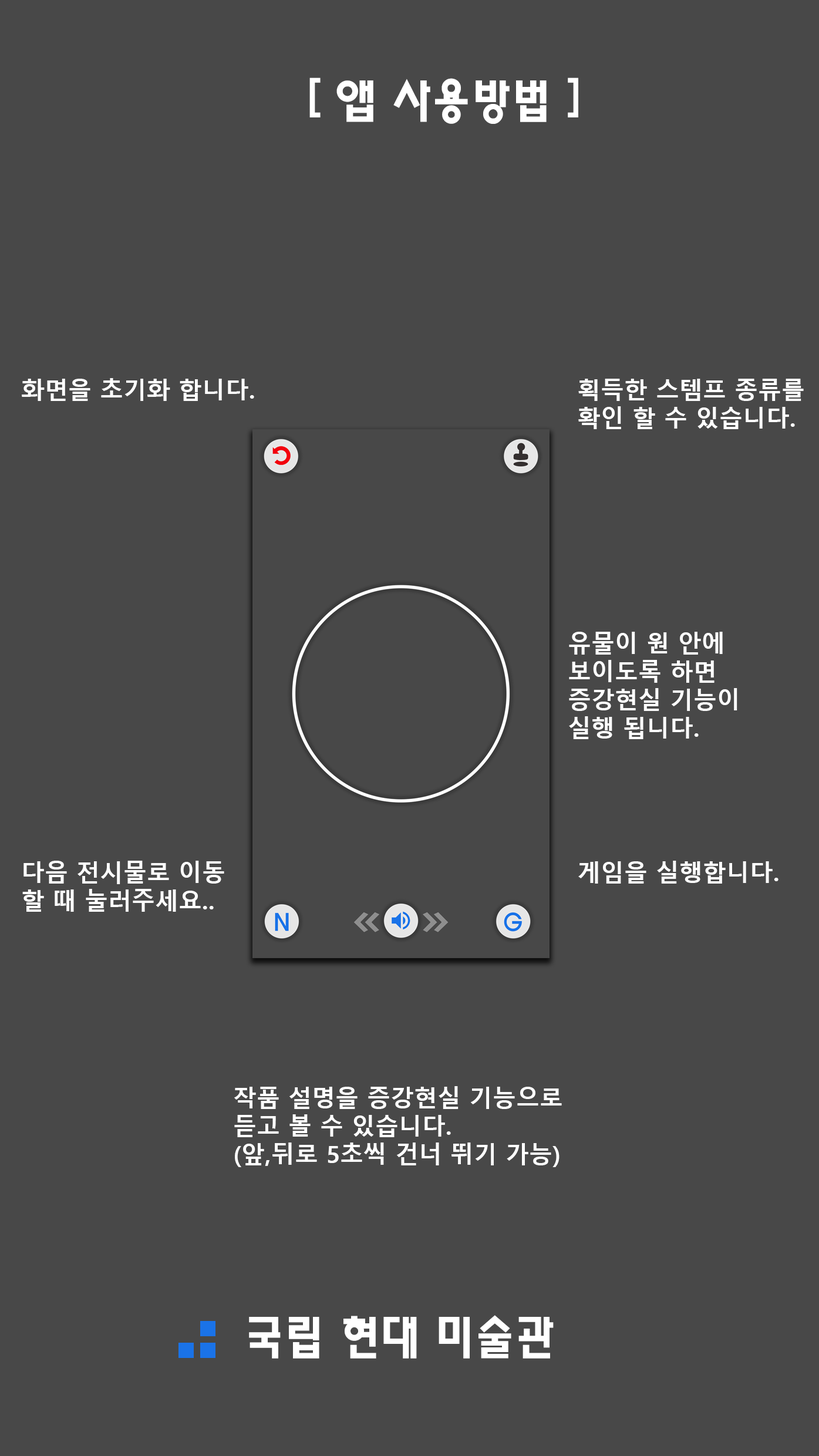
<style>
.page{position:relative;width:819px;height:1456px;background:#484848}
.page>*{position:absolute;margin:0}
.t1{font:47px "HaanYHeadM";color:#ffffff}
.t2{font:23.5px "MalgunGothicBold";color:#ffffff}
</style>
<div class="page">
<p class="t1" style="left:309px;top:77px;width:269px;height:47px">[ 앱 사용방법 ]</p>
<p class="t2" style="left:22px;top:378px;width:232px;height:23px">화면을 초기화 합니다.</p>
<p class="t2" style="left:578px;top:379px;width:226px;height:50px">획득한 스템프 종류를<br>확인 할 수 있습니다.</p>
<p class="t2" style="left:569px;top:632px;width:168px;height:107px">유물이 원 안에 <br>보이도록 하면<br>증강현실 기능이<br>실행 됩니다.</p>
<p class="t2" style="left:22px;top:861px;width:202px;height:51px">다음 전시물로 이동<br>할 때 눌러주세요..</p>
<p class="t2" style="left:578px;top:861px;width:200px;height:23px">게임을 실행합니다.</p>
<p class="t2" style="left:234px;top:1086px;width:328px;height:81px">작품 설명을 증강현실 기능으로 <br>듣고 볼 수 있습니다.<br>(앞,뒤로 5초씩 건너 뛰기 가능)</p>
<p class="t1" style="left:249px;top:1315px;width:305px;height:44px">국립 현대 미술관</p>
</div>
